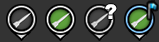
<style>
.page{position:relative;width:159px;height:42px;background:#333333}
.page>*{position:absolute;margin:0}
.t1{font:20.3px "Arial-Black";letter-spacing:0.03em;color:#ffffff}
</style>
<div class="page">
<p class="t1" style="left:105px;top:4px;width:12px;height:15px">?</p>
</div>
